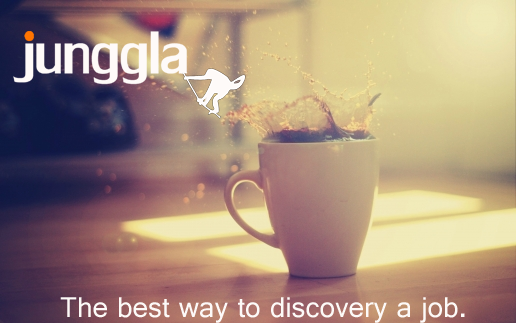
<style>
.page{position:relative;width:516px;height:323px}
.page>*{position:absolute;margin:0}
.t1{font:30px "Gautami";color:#fdfaf8}
</style>
<div class="page">
<p class="t1" style="left:60px;top:297px;width:405px;height:26px">The best way to discovery a job.</p>
</div>
